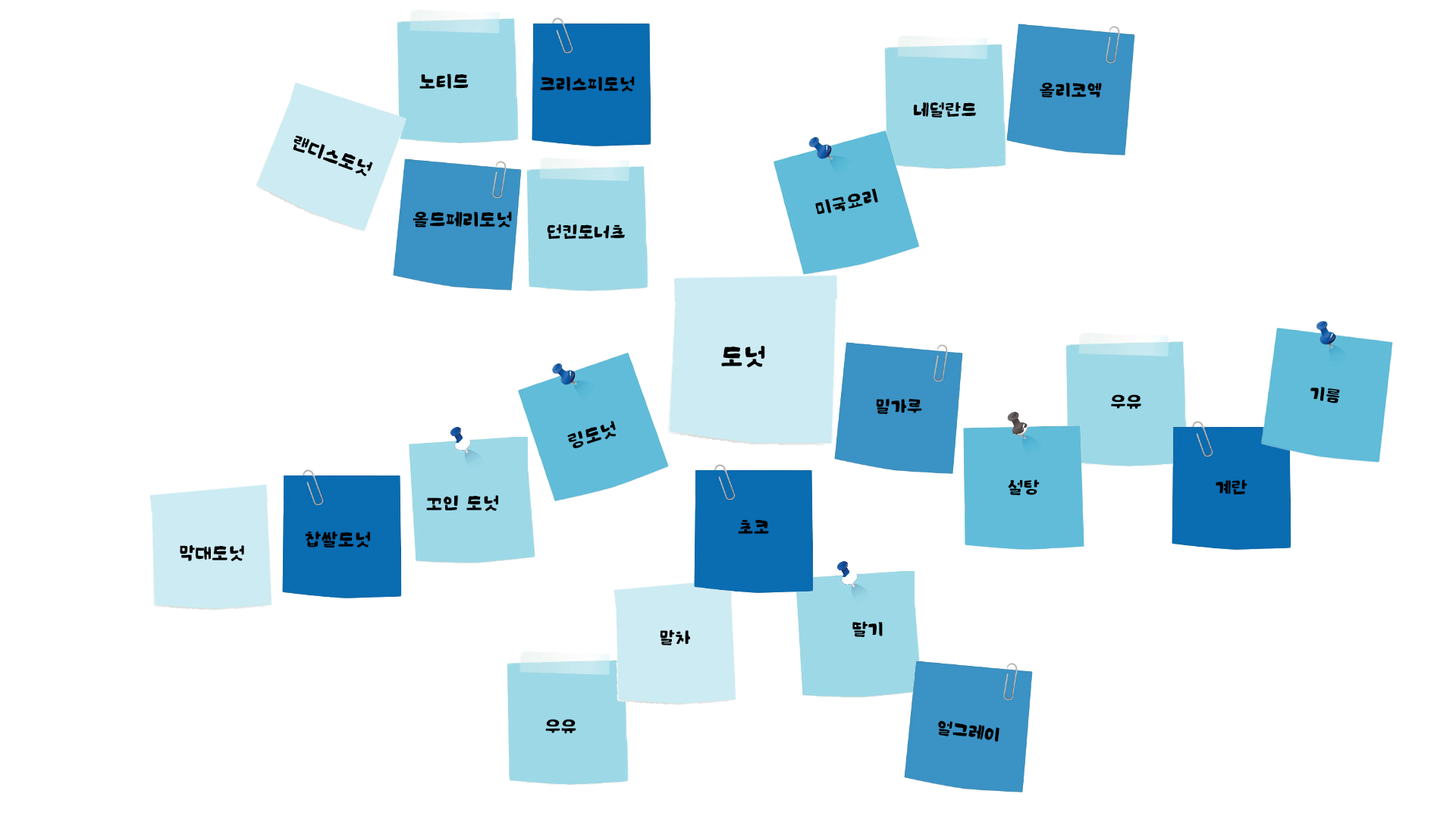
<style>
.page{position:relative;width:1456px;height:819px;background:#ffffff}
.page>*{position:absolute;margin:0}
.t1{font:16.7px "EF_jejudoldam";color:#000000;text-transform:uppercase}
.t2{font:15.9px "EF_jejudoldam";color:#000000;text-transform:uppercase}
.t3{font:22.7px "EF_jejudoldam";color:#000000;text-transform:uppercase}
</style>
<div class="page">
<p class="t1" style="left:419px;top:74px;width:50px;height:15px">노티드</p>
<p class="t2" style="left:540px;top:77px;width:95px;height:15px">크리스피도넛</p>
<p class="t2" style="left:1040px;top:83px;width:62px;height:15px">올리코엑</p>
<p class="t2" style="left:913px;top:102px;width:63px;height:16px">네덜란드</p>
<p class="t1" style="left:293px;top:135px;width:80px;height:42px;rotate:20deg">랜디스도넛</p>
<p class="t2" style="left:815px;top:188px;width:63px;height:27px;rotate:-13deg">미국요리</p>
<p class="t1" style="left:413px;top:212px;width:99px;height:15px">올드페리도넛</p>
<p class="t2" style="left:547px;top:224px;width:78px;height:15px">던킨도너츠</p>
<p class="t3" style="left:721px;top:346px;width:44px;height:22px">도넛</p>
<p class="t2" style="left:1310px;top:387px;width:30px;height:16px;rotate:7deg">기름</p>
<p class="t2" style="left:876px;top:399px;width:46px;height:15px">밀가루</p>
<p class="t2" style="left:1111px;top:394px;width:30px;height:15px">우유</p>
<p class="t1" style="left:567px;top:421px;width:49px;height:27px;rotate:-17deg">링도넛</p>
<p class="t2" style="left:1008px;top:479px;width:32px;height:16px">설탕</p>
<p class="t2" style="left:1216px;top:479px;width:31px;height:15px">계란</p>
<p class="t1" style="left:426px;top:495px;width:72px;height:16px">꼬인 도넛</p>
<p class="t2" style="left:738px;top:519px;width:31px;height:15px">초코</p>
<p class="t1" style="left:305px;top:531px;width:65px;height:17px">찹쌀도넛</p>
<p class="t1" style="left:180px;top:544px;width:64px;height:17px">막대도넛</p>
<p class="t2" style="left:660px;top:629px;width:31px;height:16px">말차</p>
<p class="t2" style="left:852px;top:621px;width:31px;height:16px">딸기</p>
<p class="t2" style="left:545px;top:719px;width:31px;height:15px">우유</p>
<p class="t2" style="left:938px;top:720px;width:61px;height:22px;rotate:7deg">얼그레이</p>
</div>
